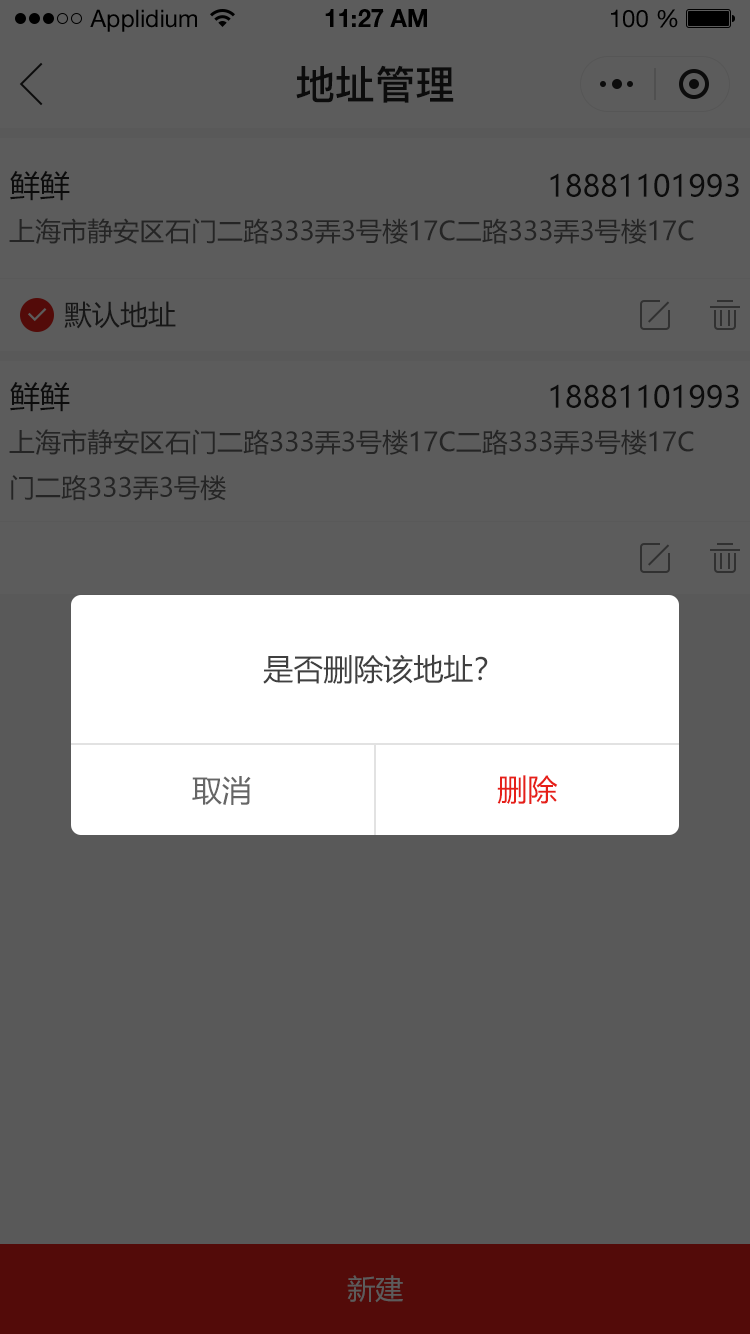
<style>
.page{position:relative;width:750px;height:1334px;background:#5c5c5c}
.page>*{position:absolute;margin:0}
.t1{font:24px "HelveticaNeueLTStd-Roman";color:#000000}
.t2{font:24px "HelveticaNeueLTStd-Bd";color:#000000}
.t3{font:40px "PingFang-SC-Bold";color:#202020;text-transform:uppercase}
.t4{font:30px "MicrosoftYaHei";color:#202020;text-transform:uppercase}
.t5{font:26px "MicrosoftYaHei";color:#252525;text-transform:uppercase}
.t6{font:28px "MicrosoftYaHei";color:#171717;text-transform:uppercase}
.t7{font:30px "MicrosoftYaHei";color:#404040;text-transform:uppercase}
.t8{font:30px "MicrosoftYaHei";color:#666666;text-transform:uppercase}
.t9{font:30px "MicrosoftYaHei";color:#e61f18;text-transform:uppercase}
.t10{font:28px "MicrosoftYaHei";color:#5c5c5c;text-transform:uppercase}
</style>
<div class="page">
<p class="t1" style="left:90px;top:9px;width:107px;height:23px">Applidium</p>
<p class="t2" style="left:325px;top:9px;width:102px;height:18px">11:27 AM</p>
<p class="t1" style="left:611px;top:9px;width:67px;height:19px">100 %</p>
<p class="t3" style="left:296px;top:65px;width:158px;height:38px">地址管理</p>
<p class="t4" style="left:10px;top:171px;width:60px;height:30px">鲜鲜</p>
<p class="t4" style="left:550px;top:173px;width:189px;height:24px">18881101993</p>
<p class="t5" style="left:9px;top:218px;width:685px;height:26px">上海市静安区石门二路333弄3号楼17c二路333弄3号楼17c</p>
<p class="t6" style="left:64px;top:301px;width:112px;height:28px">默认地址</p>
<p class="t4" style="left:10px;top:382px;width:60px;height:30px">鲜鲜</p>
<p class="t4" style="left:550px;top:384px;width:189px;height:24px">18881101993</p>
<p class="t5" style="left:9px;top:429px;width:685px;height:72px">上海市静安区石门二路333弄3号楼17c二路333弄3号楼17c<br>门二路333弄3号楼</p>
<p class="t7" style="left:263px;top:654px;width:225px;height:30px">是否删除该地址？</p>
<p class="t8" style="left:192px;top:776px;width:59px;height:29px">取消</p>
<p class="t9" style="left:497px;top:775px;width:61px;height:29px">删除</p>
<p class="t10" style="left:347px;top:1275px;width:56px;height:28px">新建</p>
</div>
